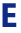
<style>
.page{position:relative;width:21px;height:33px;background:#ffffff}
.page>*{position:absolute;margin:0}
.t1{font:33.8px "Ebrima-Bold";color:#102a87;scale:0.96 1}
</style>
<div class="page">
<p class="t1" style="left:2px;top:3px;width:15px;height:24px">E</p>
</div>
